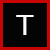
<style>
.page{position:relative;width:50px;height:50px;background:#040404}
.page>*{position:absolute;margin:0}
.t1{font:27.6px "LucidaGrande";color:#fcfbfb}
</style>
<div class="page">
<p class="t1" style="left:16px;top:15px;width:18px;height:20px">T</p>
</div>
